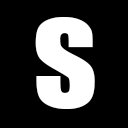
<style>
.page{position:relative;width:128px;height:128px;background:#000000}
.page>*{position:absolute;margin:0}
.t1{font:135.8px "Impact";color:#ffffff}
</style>
<div class="page">
<p class="t1" style="left:35px;top:17px;width:60px;height:92px">s</p>
</div>
